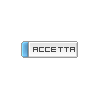
<style>
.page{position:relative;width:100px;height:100px;background:#ffffff}
.page>*{position:absolute;margin:0}
.t1{font:8px "04b08";letter-spacing:0.02em;color:#464646}
</style>
<div class="page">
<p class="t1" style="left:33px;top:47px;width:42px;height:5px">ACCETTA</p>
</div>
